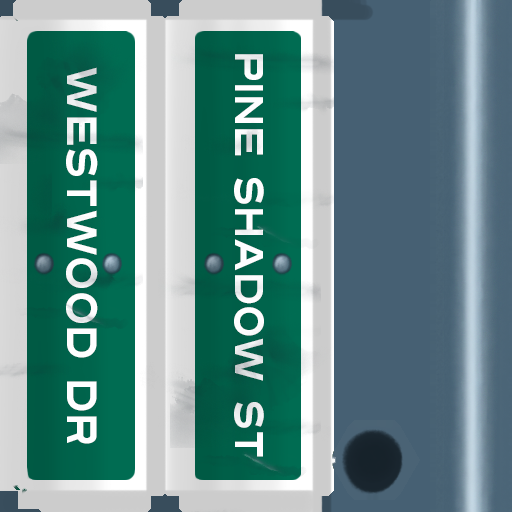
<style>
.page{position:relative;width:512px;height:512px}
.page>*{position:absolute;margin:0}
.t1{font:40px "Turnpike";color:#fefeff;scale:0.75 1}
.t2{font:42px "Turnpike";color:#fefeff;scale:0.75 1}
</style>
<div class="page">
<p class="t1" style="left:234px;top:54px;width:30px;height:403px;rotate:90deg">Pine Shadow St</p>
<p class="t2" style="left:66px;top:67px;width:32px;height:377px;rotate:90deg">Westwood Dr</p>
</div>
